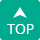
<style>
.page{position:relative;width:40px;height:40px;background:#00aa8f}
.page>*{position:absolute;margin:0}
.t1{font:14px "OpenSans";color:#ffffff;text-transform:uppercase}
</style>
<div class="page">
<p class="t1" style="left:7px;top:24px;width:27px;height:10px">top</p>
</div>
